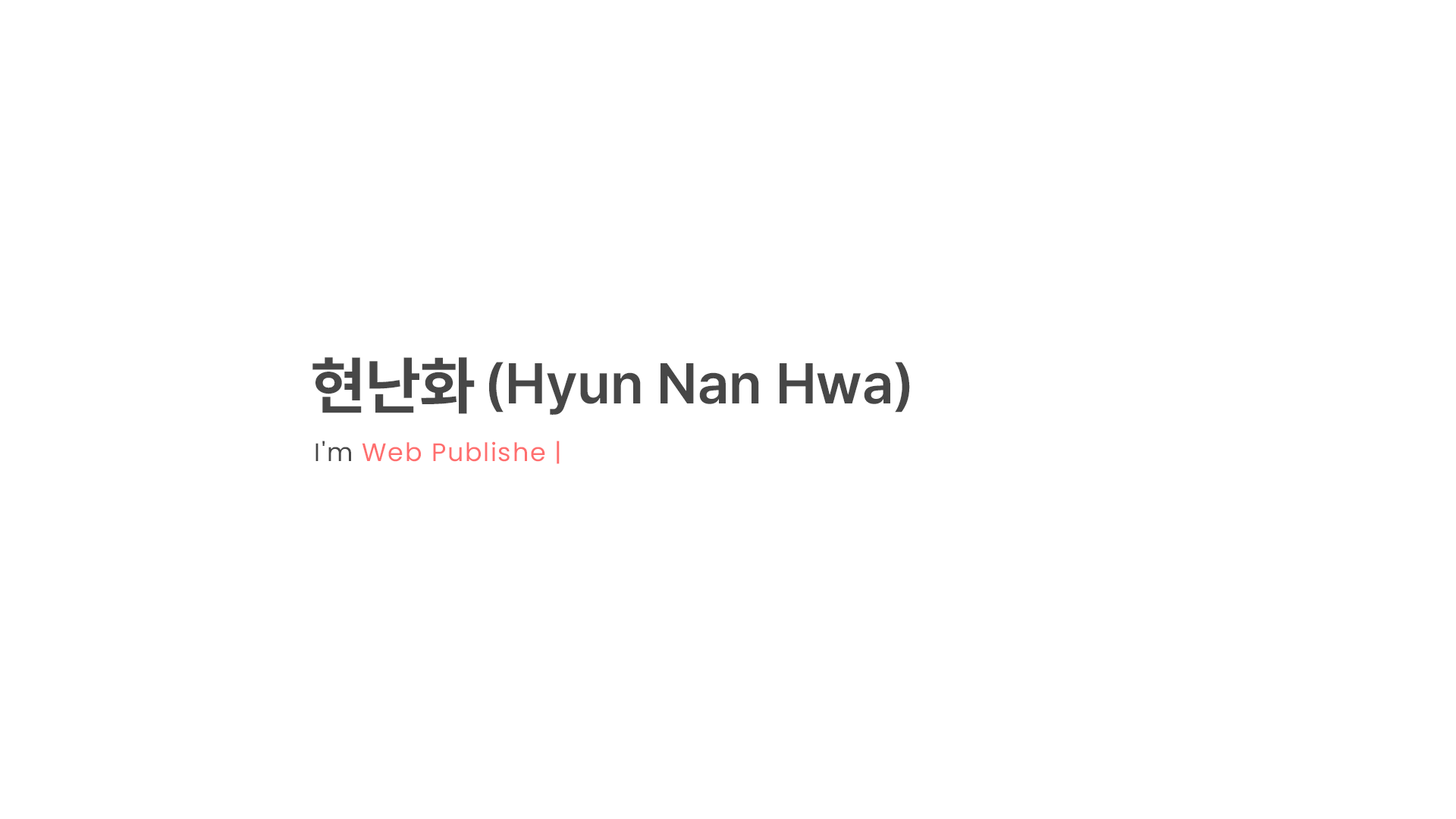
<style>
.page{position:relative;width:1456px;height:819px;background:#ffffff}
.page>*{position:absolute;margin:0}
.t1{font:63.2px "Pretendard-Bold";color:#474747}
.t2{font:56.9px "Pretendard-SemiBold";color:#474747}
.t3{font:25.3px "Poppins-Regular";letter-spacing:0.05em;color:#ff6e6e}
.t4{font:25.3px "Poppins-Regular";letter-spacing:0.05em;color:#474747}
</style>
<div class="page">
<p class="t1" style="left:312px;top:357px;width:163px;height:57px">현난화</p>
<p class="t2" style="left:489px;top:362px;width:421px;height:53px">(Hyun Nan Hwa)</p>
<p class="t3" style="left:315px;top:441px;width:245px;height:23px"><span class="t4">I'm </span>Web Publishe |</p>
</div>
